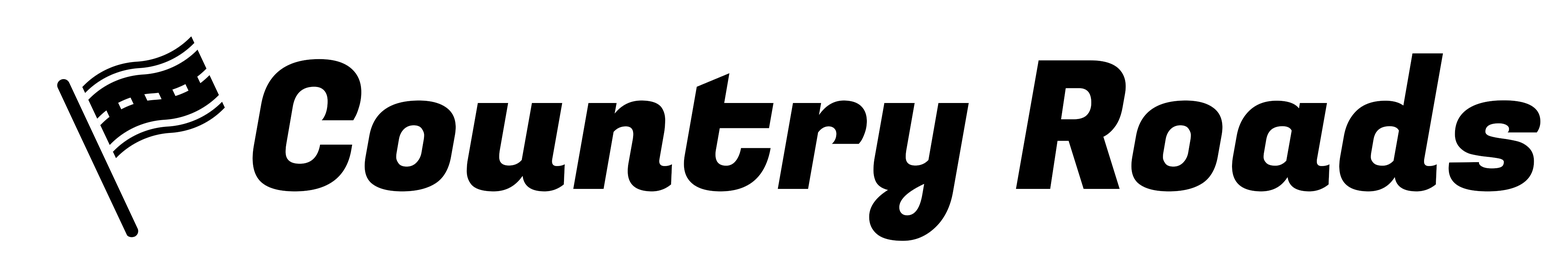
<style>
.page{position:relative;width:1568px;height:273px;background:#ffffff}
.page>*{position:absolute;margin:0}
.t1{font:178.3px "FugazOne-Regular";color:#000000}
</style>
<div class="page">
<p class="t1" style="left:253px;top:53px;width:1288px;height:188px">Country Roads</p>
</div>
